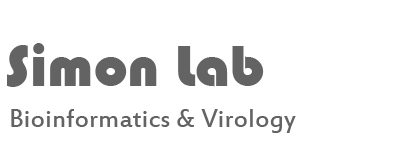
<style>
.page{position:relative;width:394px;height:161px;background:#ffffff}
.page>*{position:absolute;margin:0}
.t1{font:60px "Bauhaus93";color:#636363}
.t2{font:28px "EstrangeloEdessa";color:#636363}
</style>
<div class="page">
<p class="t1" style="left:7px;top:43px;width:257px;height:44px">Simon Lab</p>
<p class="t2" style="left:11px;top:109px;width:285px;height:24px">Bioinformatics &amp; Virology</p>
</div>
